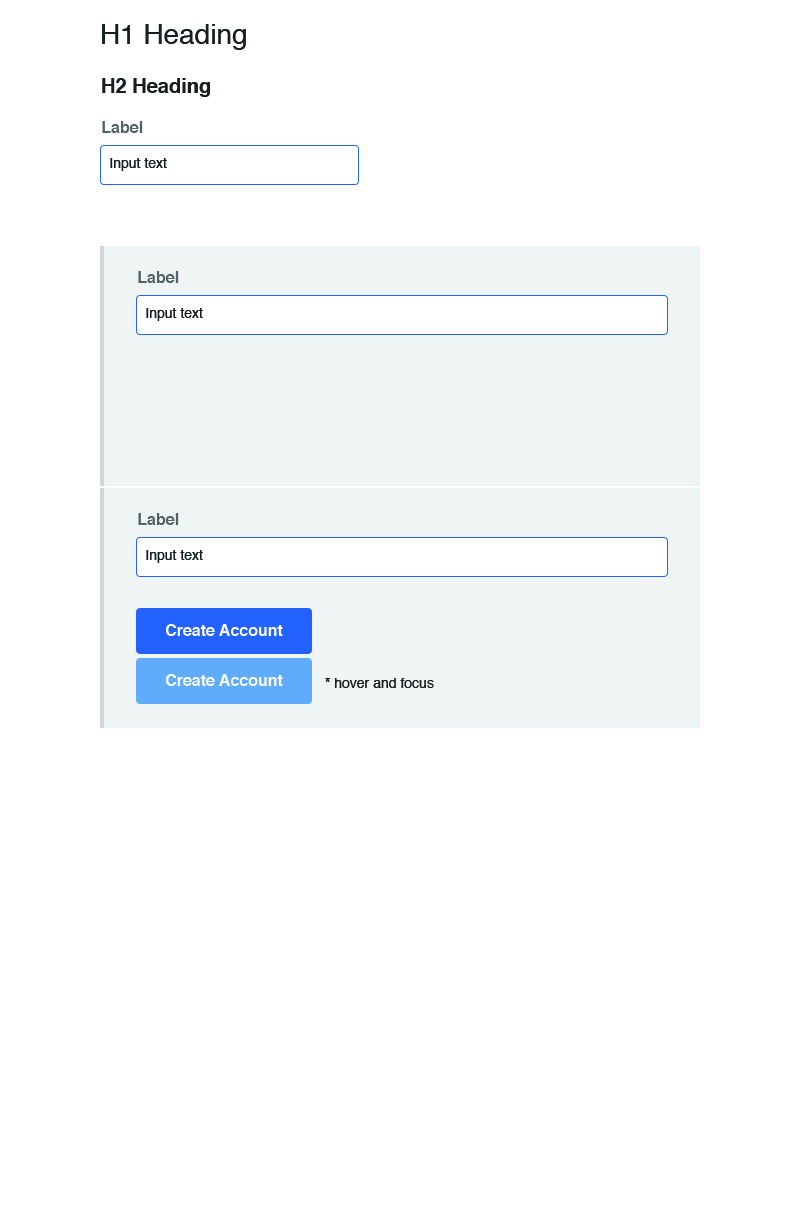
<style>
.page{position:relative;width:800px;height:1220px;background:#ffffff}
.page>*{position:absolute;margin:0}
.t1{font:28px "Helvetica";color:#181d1e}
.t2{font:20px "Helvetica-Bold";color:#181d1e}
.t3{font:16px "Helvetica-Bold";color:#526364}
.t4{font:14px "Helvetica";color:#181d1e}
.t5{font:16px "Helvetica-Bold";color:#ffffff}
</style>
<div class="page">
<p class="t1" style="left:102px;top:24px;width:144px;height:26px">H1 Heading</p>
<p class="t2" style="left:102px;top:78px;width:108px;height:19px">H2 Heading</p>
<p class="t3" style="left:102px;top:121px;width:41px;height:12px">Label</p>
<p class="t4" style="left:110px;top:158px;width:57px;height:13px">Input text</p>
<p class="t3" style="left:138px;top:271px;width:41px;height:12px">Label</p>
<p class="t4" style="left:146px;top:308px;width:57px;height:13px">Input text</p>
<p class="t3" style="left:138px;top:513px;width:41px;height:12px">Label</p>
<p class="t4" style="left:146px;top:550px;width:57px;height:13px">Input text</p>
<p class="t5" style="left:166px;top:624px;width:117px;height:12px">Create Account</p>
<p class="t5" style="left:166px;top:674px;width:117px;height:12px">Create Account</p>
<p class="t4" style="left:325px;top:678px;width:109px;height:10px">* hover and focus</p>
</div>
